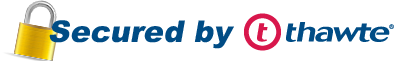
<style>
.page{position:relative;width:400px;height:62px;background:#ffffff}
.page>*{position:absolute;margin:0}
.t1{font:30px "Arial-Black";color:#004c85;font-style:italic}
</style>
<div class="page">
<p class="t1" style="left:49px;top:20px;width:185px;height:29px">Secured by</p>
</div>
